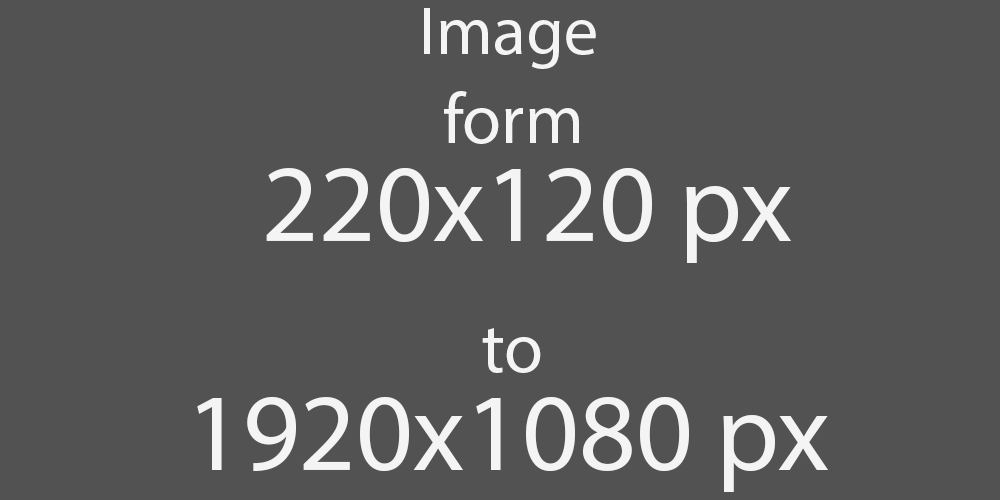
<style>
.page{position:relative;width:1000px;height:500px;background:#525252}
.page>*{position:absolute;margin:0}
.t1{font:68.3px "MyriadPro-Regular";color:#f4f4f4}
.t2{font:71.2px "MyriadPro-Regular";color:#f4f4f4}
.t3{font:111.1px "MyriadPro-Regular";color:#f4f4f4}
</style>
<div class="page">
<p class="t1" style="left:424px;top:8px;width:172px;height:61px">Image</p>
<p class="t2" style="left:444px;top:91px;width:135px;height:53px">form</p>
<p class="t3" style="left:266px;top:167px;width:525px;height:96px">220x120 px</p>
<p class="t2" style="left:482px;top:328px;width:59px;height:45px">to</p>
<p class="t3" style="left:197px;top:396px;width:631px;height:96px">1920x1080 px</p>
</div>
